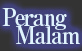
<style>
.page{position:relative;width:82px;height:51px;background:#414179}
.page>*{position:absolute;margin:0}
.t1{font:24px/18px "RyuminPro-ExBold";letter-spacing:-0.08em;color:#dff3ff;scale:0.9 1}
</style>
<div class="page">
<p class="t1" style="left:2px;top:8px;width:78px;height:36px;text-align:center">Perang<br>     Malam</p>
</div>
